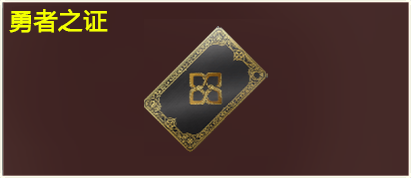
<style>
.page{position:relative;width:411px;height:178px}
.page>*{position:absolute;margin:0}
.t1{font:24px "MicrosoftYaHeiUI";color:#f4ff00;font-weight:bold}
</style>
<div class="page">
<p class="t1" style="left:9px;top:9px;width:99px;height:24px">勇者之证</p>
</div>
